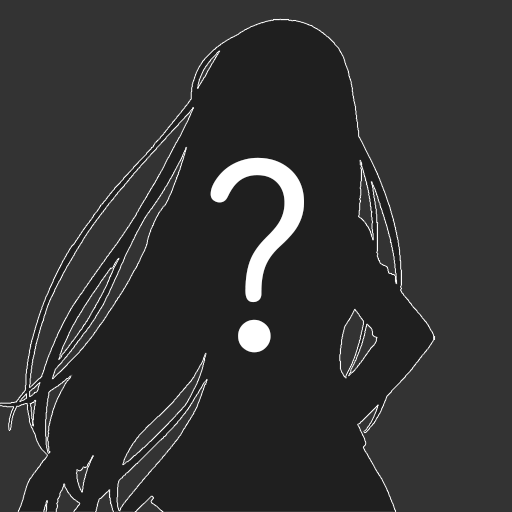
<style>
.page{position:relative;width:512px;height:512px;background:#333333}
.page>*{position:absolute;margin:0}
.t1{font:234.1px "UDDigiKyokashoN-R";color:#ffffff}
</style>
<div class="page">
<p class="t1" style="left:210px;top:157px;width:94px;height:196px">?</p>
</div>
